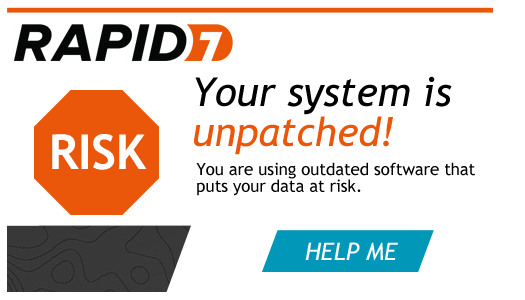
<style>
.page{position:relative;width:525px;height:300px;background:#ffffff}
.page>*{position:absolute;margin:0}
.t1{font:40px/40px "TrebuchetMS-Italic";color:#000000}
.t2{font:40px/40px "TrebuchetMS-Italic";color:#ea570a}
.t3{font:48px "TrebuchetMS-Bold";color:#ffffff}
.t4{font:16.7px/16.7px "TrebuchetMS";color:#000000}
.t5{font:24px "TrebuchetMS-Italic";color:#ffffff}
</style>
<div class="page">
<p class="t1" style="left:194px;top:76px;width:258px;height:79px">Your system is<br><span class="t2">unpatched!</span></p>
<p class="t3" style="left:52px;top:134px;width:95px;height:36px">RISK</p>
<p class="t4" style="left:196px;top:162px;width:279px;height:34px">You are using outdated software that<br>puts your data at risk.</p>
<p class="t5" style="left:305px;top:242px;width:93px;height:19px">HELP ME</p>
</div>
